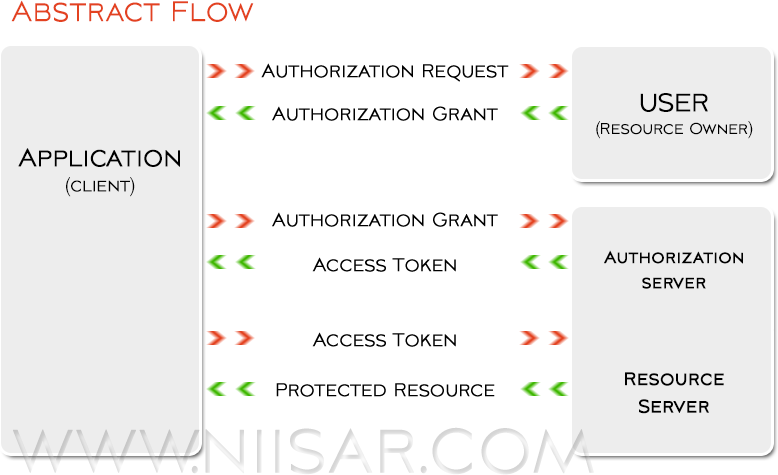
<style>
.page{position:relative;width:778px;height:475px;background:#ffffff}
.page>*{position:absolute;margin:0}
.t1{font:35px "AvianoSansLight";color:#e34220;font-weight:bold;scale:0.76 1}
.t2{font:23px "AvianoSansLight";color:#000000;font-weight:bold;scale:0.76 1}
.t3{font:19px "AvianoSansLight";color:#000000;font-weight:bold;scale:0.76 1}
.t4{font:31px "AvianoSansLight";color:#000000;font-weight:bold;scale:0.76 1}
.t5{font:21px "AvianoSansLight";color:#000000;font-weight:bold;scale:0.76 1}
.t6{font:21px "AvianoSans";color:#000000;font-weight:bold;scale:0.76 1}
.t7{font:23px "AvianoSans";color:#000000;font-weight:bold;scale:0.76 1}
.t8{font:83.9px "AvianoSansLight";color:#dfdfdf;font-weight:bold;scale:0.76 1}
</style>
<div class="page">
<p class="t1" style="left:11px;top:0px;width:243px;height:22px">Abstract Flow</p>
<p class="t2" style="left:261px;top:63px;width:248px;height:19px">Authorization Request</p>
<p class="t3" style="left:596px;top:93px;width:157px;height:46px;text-align:center"><span class="t4">USER<br></span>(Resource Owner)</p>
<p class="t2" style="left:272px;top:106px;width:226px;height:15px">Authorization Grant</p>
<p class="t4" style="left:18px;top:148px;width:162px;height:49px;text-align:center">Application<br><span class="t5">(client)</span></p>
<p class="t2" style="left:272px;top:212px;width:226px;height:15px">Authorization Grant</p>
<p class="t2" style="left:312px;top:257px;width:144px;height:15px">Access Token</p>
<p class="t6" style="left:604px;top:250px;width:139px;height:39px;text-align:center">Authorization<br>server</p>
<p class="t2" style="left:312px;top:332px;width:144px;height:15px">Access Token</p>
<p class="t7" style="left:625px;top:372px;width:99px;height:42px;text-align:center">Resource<br>Server</p>
<p class="t2" style="left:276px;top:383px;width:219px;height:14px">Protected Resource</p>
<p class="t8" style="left:13px;top:427px;width:581px;height:48px">www.niisar.com</p>
</div>
